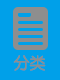
<style>
.page{position:relative;width:60px;height:80px;background:#00a0e9}
.page>*{position:absolute;margin:0}
.t1{font:16px "STYuanti-SC-Regular";color:#8e8e8e}
</style>
<div class="page">
<p class="t1" style="left:13px;top:55px;width:33px;height:16px">分类</p>
</div>
